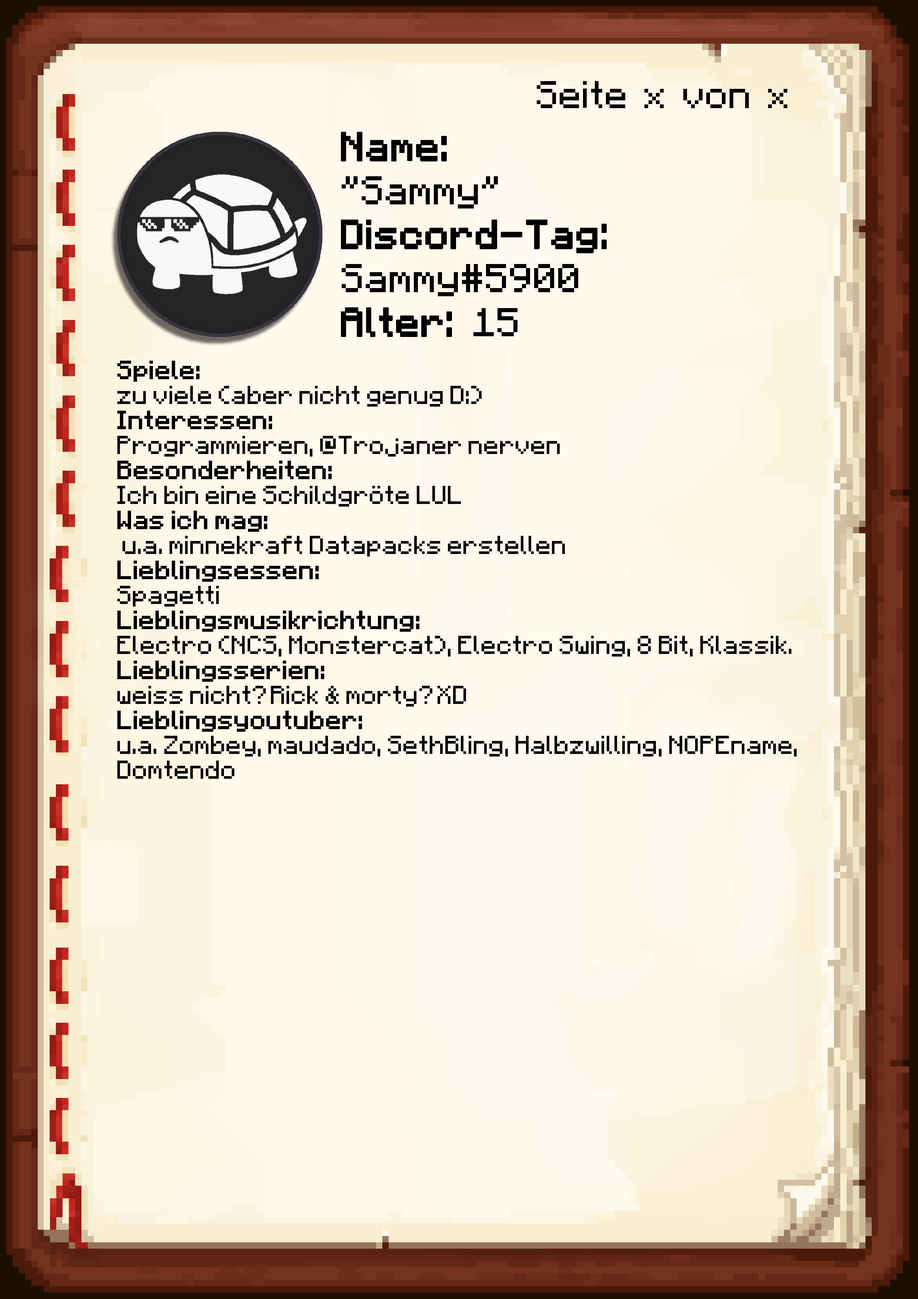
<style>
.page{position:relative;width:918px;height:1299px}
.page>*{position:absolute;margin:0}
.t1{font:38.6px "Minecraft-Regular";color:#000000}
.t2{font:40.1px/43.9px "Minecraft-Regular";color:#000000;font-weight:bold}
.t3{font:40.1px/43.9px "Minecraft-Regular";color:#000000}
.t4{font:20.8px "Minecraft";color:#000000}
.t5{font:20.8px "Minecraft";color:#000000;font-weight:bold}
</style>
<div class="page">
<p class="t1" style="left:537px;top:81px;width:250px;height:27px">Seite x von x</p>
<p class="t2" style="left:341px;top:132px;width:266px;height:205px">Name:<br><span class="t3">"Sammy"<br></span>Discord-Tag:<br><span class="t3">Sammy#5900<br></span>Alter: <span class="t3">15</span></p>
<p class="t4" style="left:117px;top:361px;width:680px;height:418px"><span class="t5">Spiele: <br></span>zu viele (aber nicht genug D:)<br><span class="t5">Interessen:<br></span>Programmieren, @Trojaner nerven<br><span class="t5">Besonderheiten:<br></span>Ich bin eine Schildgröte LUL<br><span class="t5">Was ich mag:<br></span> u.a. minnekraft Datapacks erstellen<br><span class="t5">Lieblingsessen:<br></span>Spagetti<br><span class="t5">Lieblingsmusikrichtung:<br></span>Electro (NCS, Monstercat), Electro Swing, 8 Bit, Klassik.<br><span class="t5">Lieblingsserien:<br></span>weiss nicht? Rick &amp; morty? XD<br><span class="t5">Lieblingsyoutuber:<br></span>u.a. Zombey, maudado, SethBling, Halbzwilling, NOPEname, Domtendo</p>
</div>
